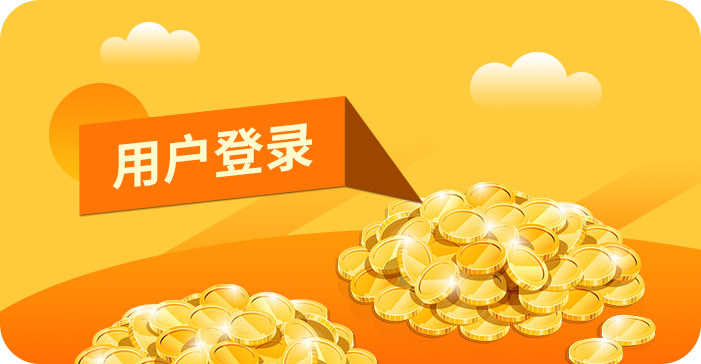
<style>
.page{position:relative;width:701px;height:364px;background:#ffca3b}
.page>*{position:absolute;margin:0}
.t1{font:51px "SourceHanSansCN-Bold";color:#fefccd}
</style>
<div class="page">
<p class="t1" style="left:112px;top:123px;width:201px;height:67px;rotate:-6deg">用户登录</p>
</div>
